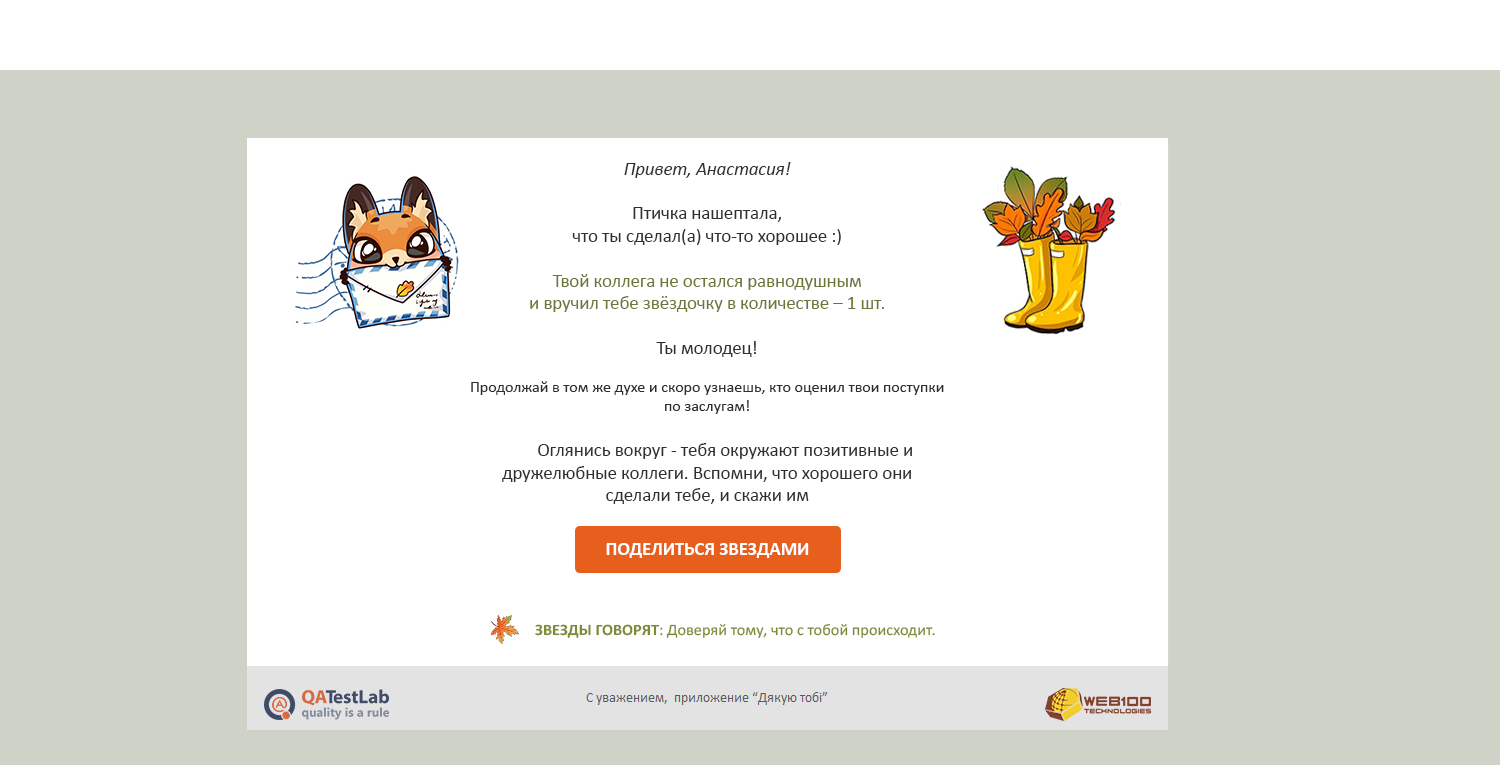
<style>
.page{position:relative;width:1500px;height:765px;background:#ffffff}
.page>*{position:absolute;margin:0}
.t1{font:18.7px "Calibri";color:#2f2f2f}
.t2{font:18.7px "Calibri-Italic";color:#2f2f2f}
.t3{font:18.7px "Calibri";color:#6d7538}
.t4{font:16px "Calibri";color:#2f2f2f}
.t5{font:18.7px "Calibri-Bold";color:#ffffff}
.t6{font:16px "Calibri";color:#7f8a35}
.t7{font:16px "Calibri-Bold";color:#7f8a35}
</style>
<div class="page">
<p class="t1" style="left:471px;top:162px;width:473px;height:342px;text-align:center"><span class="t2">Привет, Анастасия!<br></span><br>Птичка нашептала,<br>что ты сделал(а) что-то хорошее :) <br><br><span class="t3">Твой коллега не остался равнодушным<br>и вручил тебе звёздочку в количестве – 1 шт. <br></span><br>Ты молодец! <br><span class="t4"><br>Продолжай в том же духе и скоро узнаешь, кто оценил твои поступки по заслугам! <br></span><br>  Оглянись вокруг - тебя окружают позитивные и <br>дружелюбные коллеги. Вспомни, что хорошего они<br>сделали тебе, и скажи им</p>
<p class="t5" style="left:606px;top:543px;width:203px;height:15px">ПОДЕЛИТЬСЯ ЗВЕЗДАМИ</p>
<p class="t6" style="left:535px;top:623px;width:400px;height:15px"><span class="t7"> ЗВЕЗДЫ ГОВОРЯТ</span>: Доверяй тому, что с тобой происходит.</p>
</div>
